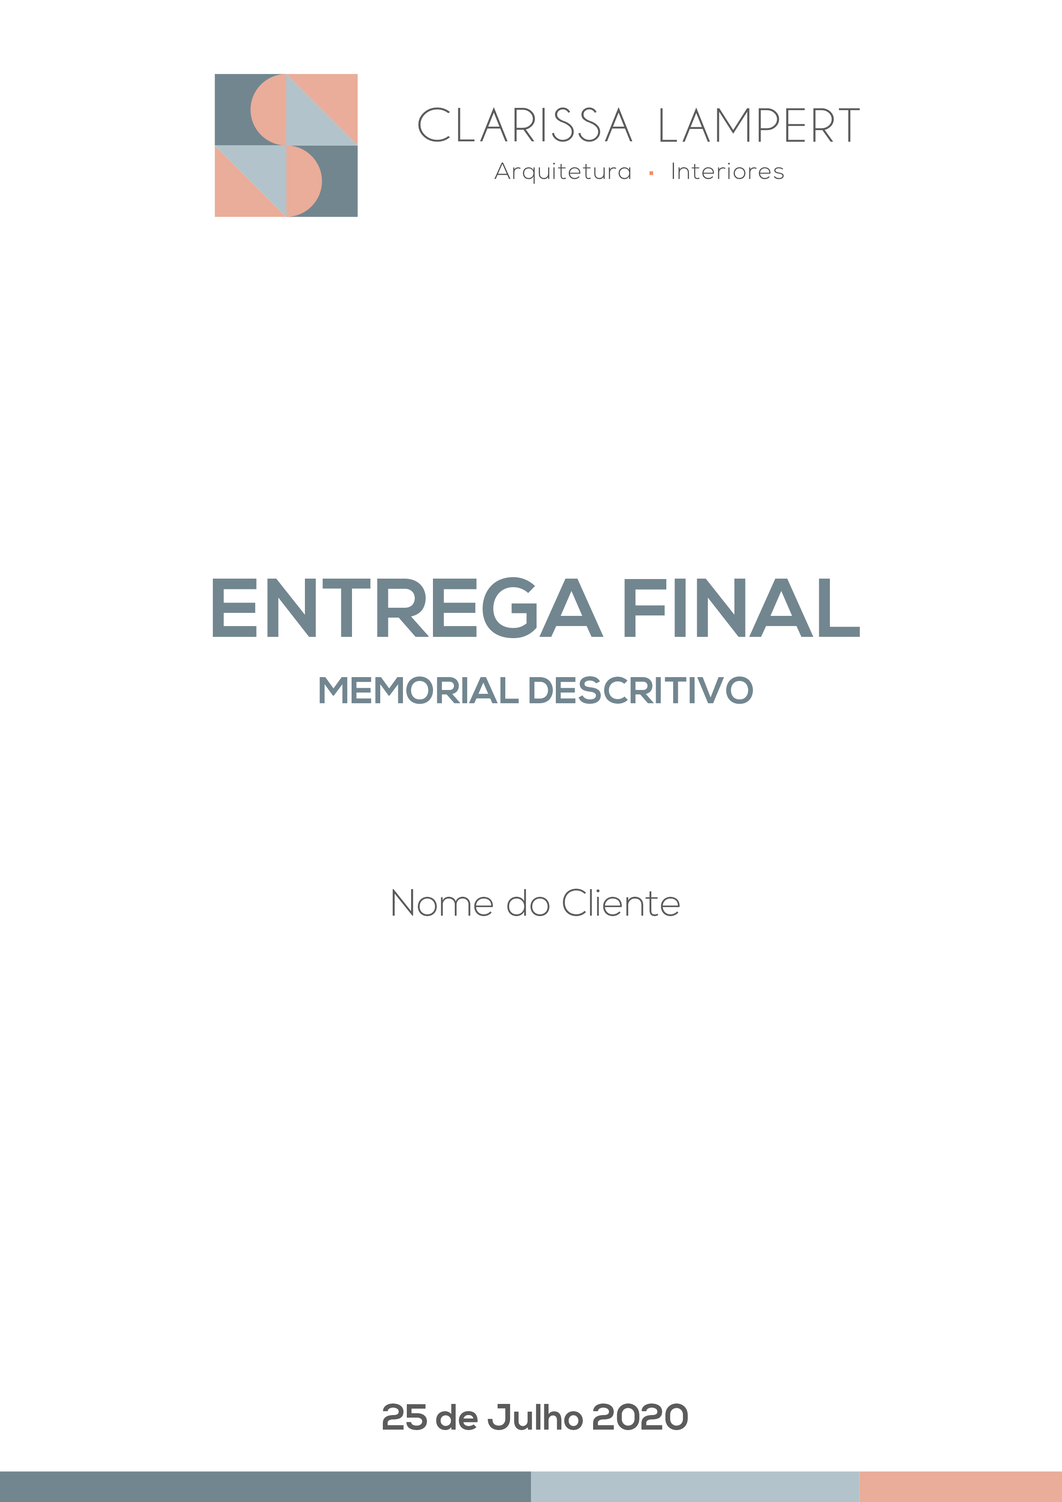
<style>
.page{position:relative;width:1062px;height:1502px;background:#ffffff}
.page>*{position:absolute;margin:0}
.t1{font:19.9px "NexaBold";color:#728690}
.t2{font:9px "NexaBold";color:#728690}
.t3{font:9px "NexaLight";color:#5b5b5b}
.t4{font:8.8px "NexaBold";color:#5b5b5b}
</style>
<div class="page">
<p class="t1" style="left:213px;top:577px;width:647px;height:61px;text-align:justify">ENTREGA FINAL</p>
<p class="t2" style="left:320px;top:676px;width:433px;height:28px;text-align:justify">MEMORIAL DESCRITIVO</p>
<p class="t3" style="left:393px;top:889px;width:287px;height:27px;text-align:justify">Nome do Cliente</p>
<p class="t4" style="left:383px;top:1404px;width:305px;height:26px;text-align:justify">25 de Julho 2020</p>
</div>
